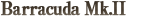
<style>
.page{position:relative;width:151px;height:16px;background:#ffffff}
.page>*{position:absolute;margin:0}
.t1{font:18px "RyuminPro-ExBold";letter-spacing:-0.06em;color:#4a3f32;font-weight:bold;scale:0.9 1}
</style>
<div class="page">
<p class="t1" style="left:1px;top:1px;width:125px;height:15px">Barracuda Mk.II</p>
</div>
